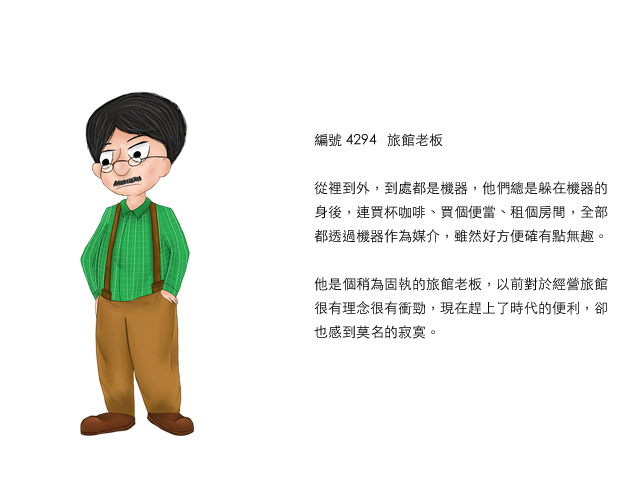
<style>
.page{position:relative;width:640px;height:480px;background:#ffffff}
.page>*{position:absolute;margin:0}
.t1{font:14px/24px "STHeitiTC-Light";color:#000000}
</style>
<div class="page">
<p class="t1" style="left:314px;top:133px;width:294px;height:206px">編號 4294   旅館老板<br><br>從裡到外，到處都是機器，他們總是躲在機器的身後，連買杯咖啡、買個便當、租個房間，全部都透過機器作為媒介，雖然好方便確有點無趣。<br><br>他是個稍為固執的旅館老板，以前對於經營旅館很有理念很有衝勁，現在趕上了時代的便利，卻也感到莫名的寂寞。</p>
</div>
